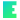
<style>
.page{position:relative;width:20px;height:20px;background:#ffffff}
.page>*{position:absolute;margin:0}
.t1{font:24px "Quadratum"}
</style>
<div class="page">
<p class="t1" style="left:3px;top:1px;width:14px;height:17px">e</p>
</div>
